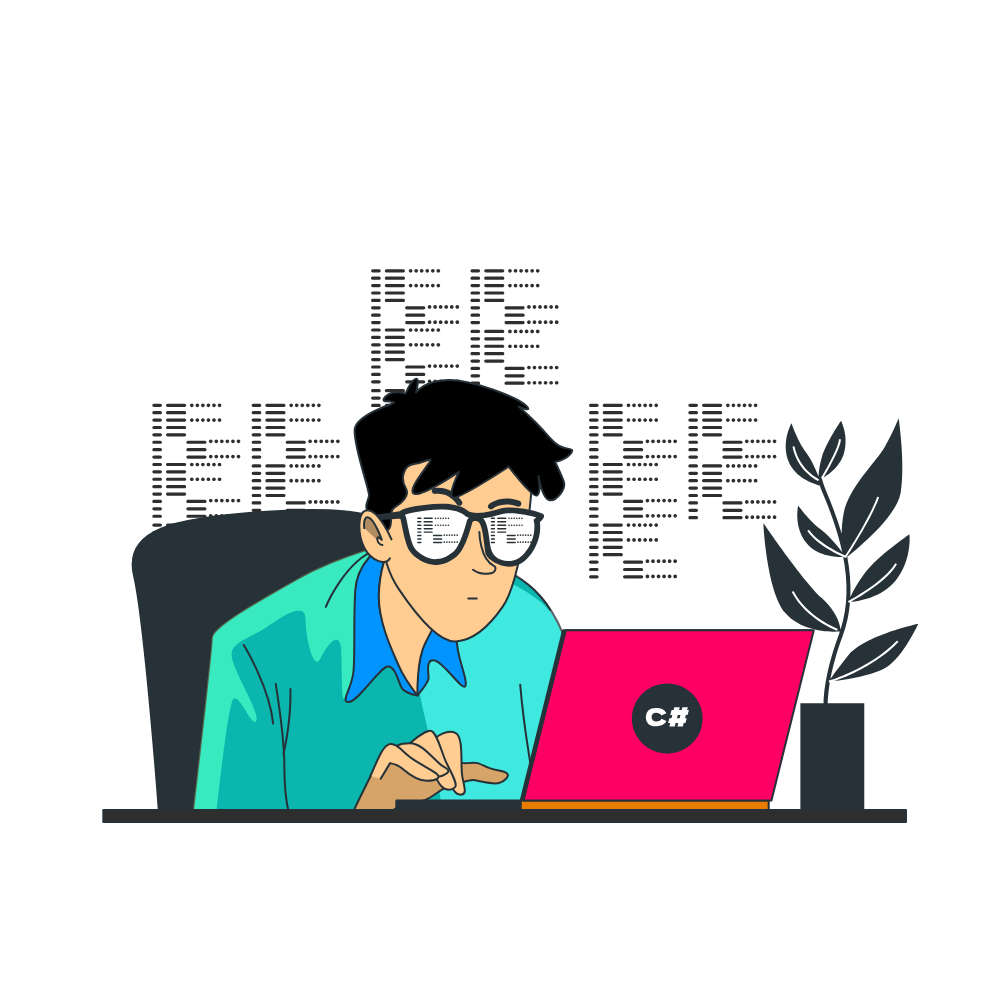
<style>
.page{position:relative;width:1000px;height:1000px;background:#ffffff}
.page>*{position:absolute;margin:0}
.t1{font:24px "DelaGothicOne-Regular";color:#ffffff}
</style>
<div class="page">
<p class="t1" style="left:645px;top:707px;width:44px;height:20px">C#</p>
</div>
